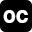
<style>
.page{position:relative;width:32px;height:32px;background:#000000}
.page>*{position:absolute;margin:0}
.t1{font:20px "FranklinGothic-Demi";color:#ffffff}
</style>
<div class="page">
<p class="t1" style="left:3px;top:10px;width:25px;height:13px">OC</p>
</div>
